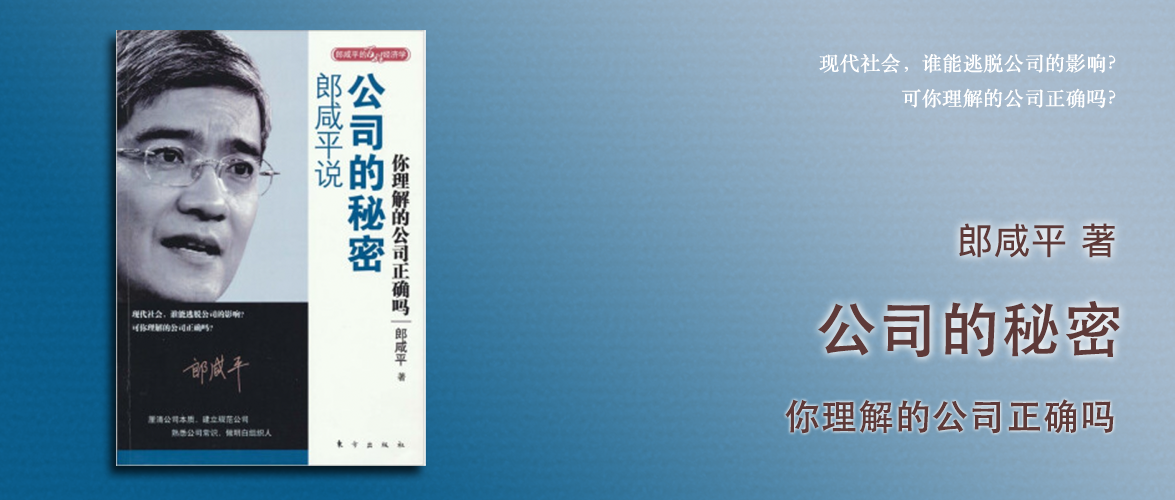
<style>
.page{position:relative;width:1175px;height:500px}
.page>*{position:absolute;margin:0}
.t1{font:20px "STSongti-SC-Regular";color:#ffffff;font-weight:bold}
.t2{font:36px "PingFangSC-Regular";color:#5e3939;font-weight:bold}
.t3{font:60px "STHeiti";color:#5e3a39;font-weight:bold}
.t4{font:36px "AdobeHeitiStd-Regular";color:#5e3a39;font-weight:bold}
</style>
<div class="page">
<p class="t1" style="left:819px;top:53px;width:297px;height:55px;text-align:right">现代社会，谁能逃脱公司的影响？<br>可你理解的公司正确吗？</p>
<p class="t2" style="left:959px;top:223px;width:156px;height:35px">郎咸平 著</p>
<p class="t3" style="left:818px;top:301px;width:302px;height:56px">公司的秘密</p>
<p class="t4" style="left:785px;top:399px;width:329px;height:35px">你理解的公司正确吗</p>
</div>
